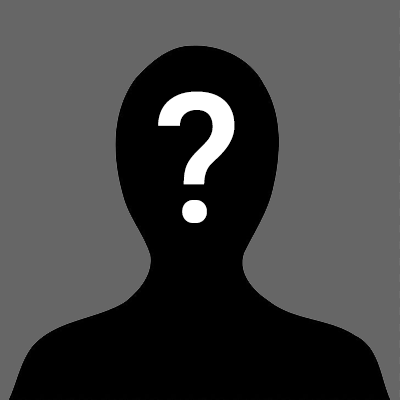
<style>
.page{position:relative;width:400px;height:400px;background:#666666}
.page>*{position:absolute;margin:0}
.t1{font:180.8px "Roboto-Medium";color:#ffffff}
</style>
<div class="page">
<p class="t1" style="left:158px;top:91px;width:77px;height:132px">?</p>
</div>
